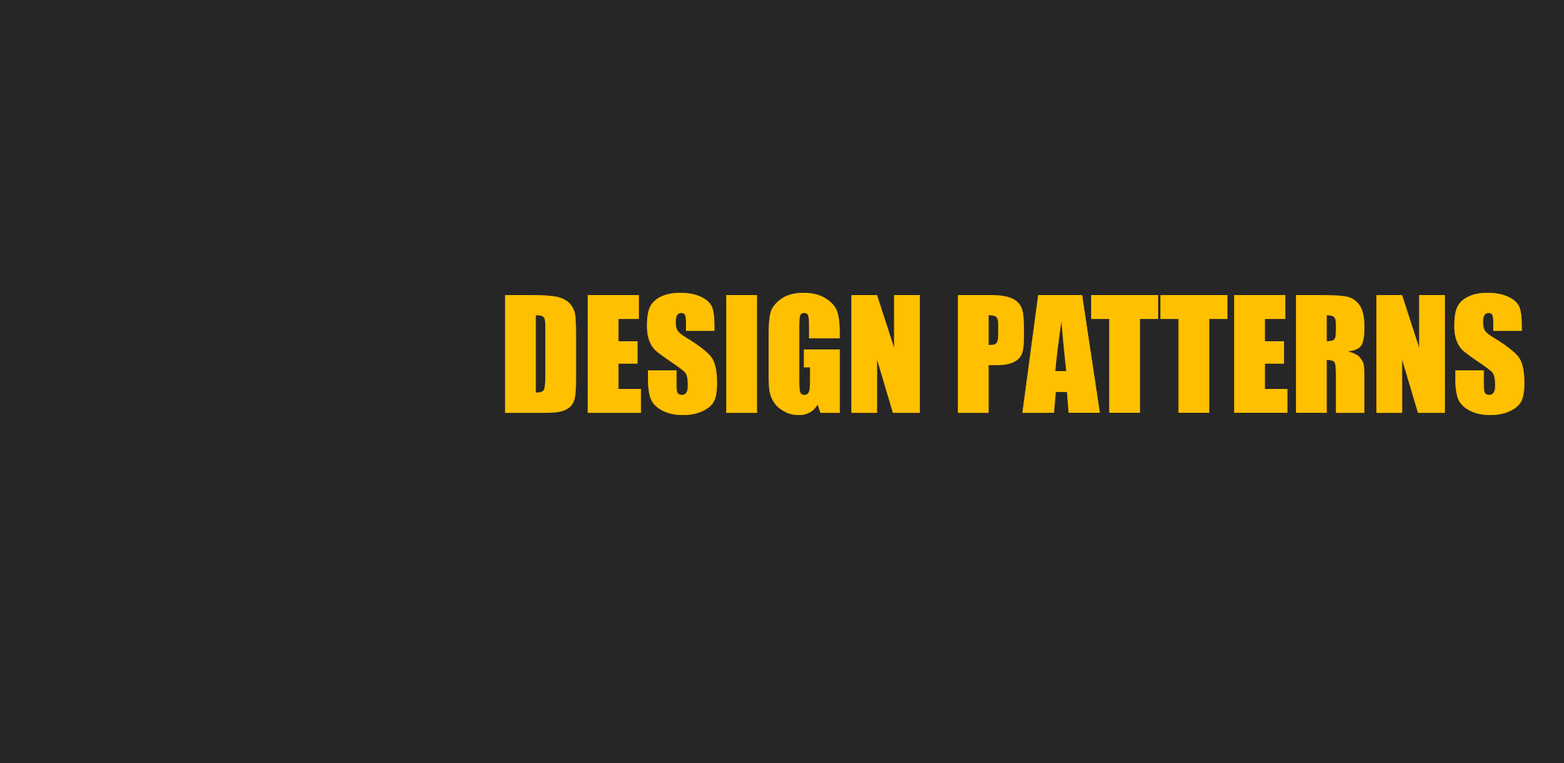
<style>
.page{position:relative;width:1564px;height:763px;background:#262626}
.page>*{position:absolute;margin:0}
.t1{font:148.9px "Impact";color:#ffc000}
</style>
<div class="page">
<p class="t1" style="left:505px;top:293px;width:1019px;height:122px">DESIGN PATTERNS</p>
</div>
